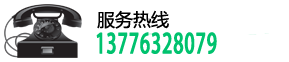
<style>
.page{position:relative;width:289px;height:62px;background:#ffffff}
.page>*{position:absolute;margin:0}
.t1{font:27px "AdobeHeitiStd-Regular";letter-spacing:0.03em;color:#00c26e;font-weight:bold;scale:0.67 1}
</style>
<div class="page">
<p class="t1" style="left:96px;top:32px;width:121px;height:22px">13776328079</p>
</div>
